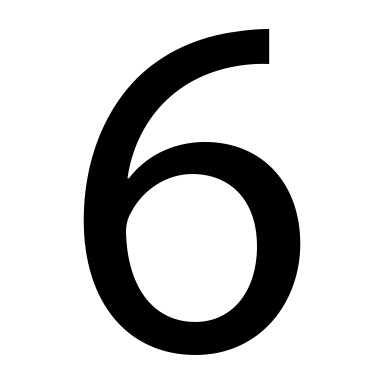
<style>
.page{position:relative;width:384px;height:384px;background:#ffffff}
.page>*{position:absolute;margin:0}
.t1{font:486.1px "MyriadPro-Regular";color:#000000}
</style>
<div class="page">
<p class="t1" style="left:83px;top:29px;width:218px;height:326px">6</p>
</div>
